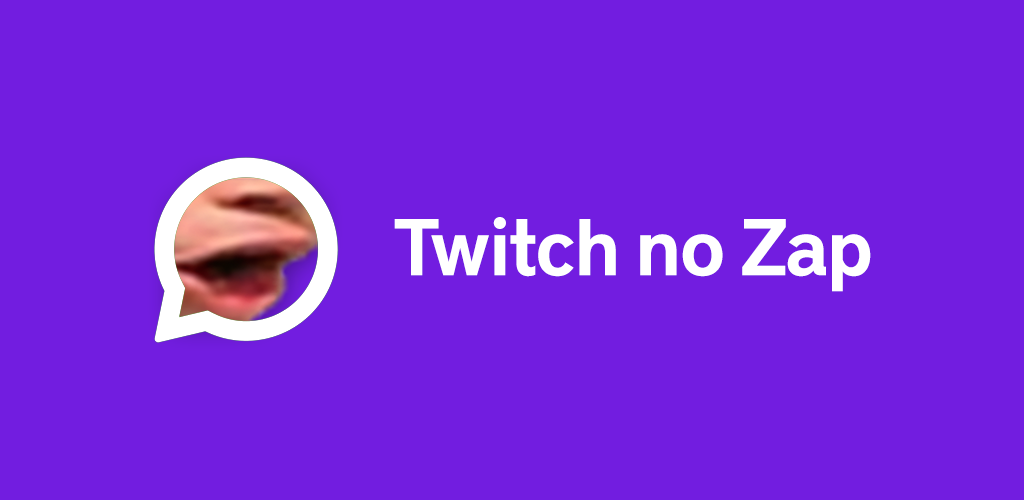
<style>
.page{position:relative;width:1024px;height:500px;background:#721de0}
.page>*{position:absolute;margin:0}
.t1{font:80px "DistrictPro-Demi";letter-spacing:-0.025em;color:#ffffff}
</style>
<div class="page">
<p class="t1" style="left:394px;top:217px;width:477px;height:75px">Twitch no Zap</p>
</div>
